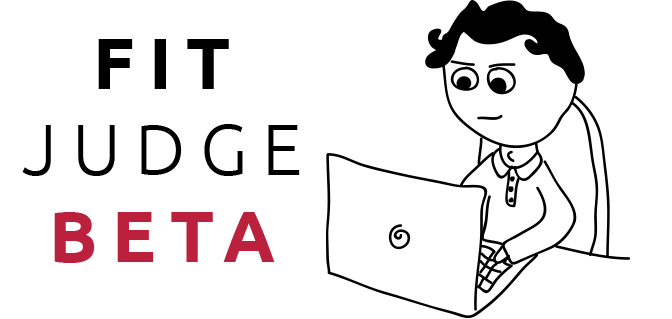
<style>
.page{position:relative;width:672px;height:319px;background:#ffffff}
.page>*{position:absolute;margin:0}
.t1{font:72px "Ubuntu-Light";letter-spacing:0.2em;color:#000000}
.t2{font:72px "Ubuntu-Bold";letter-spacing:0.2em;color:#000000}
.t3{font:72px "Ubuntu-Bold";letter-spacing:0.2em;color:#bb203d}
</style>
<div class="page">
<p class="t1" style="left:22px;top:39px;width:278px;height:224px;text-align:center"><span class="t2">FIT<br></span>JUDGE<br><span class="t3">BETA</span></p>
</div>
